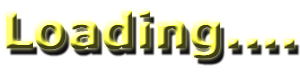
<style>
.page{position:relative;width:300px;height:76px;background:#ffffff}
.page>*{position:absolute;margin:0}
.t1{font:48px "Verdana-Bold";font-weight:bold}
</style>
<div class="page">
<p class="t1" style="left:6px;top:11px;width:289px;height:48px">Loading....</p>
</div>
